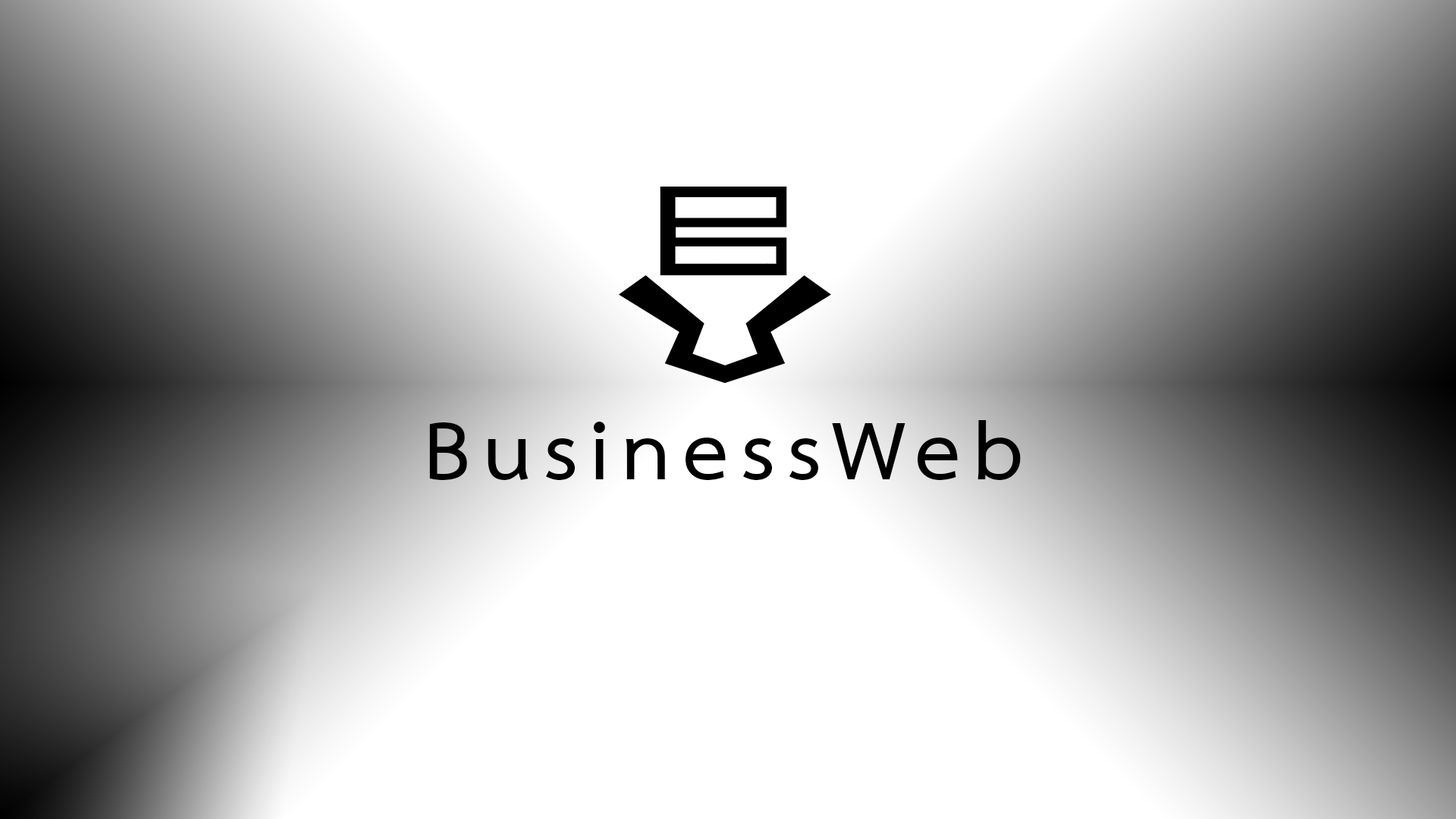
<style>
.page{position:relative;width:1456px;height:819px;background:#ffffff}
.page>*{position:absolute;margin:0}
.t1{font:117.5px "THSarabunNew-Bold";letter-spacing:0.1em;color:#000000}
</style>
<div class="page">
<p class="t1" style="left:429px;top:420px;width:592px;height:60px">BusinessWeb</p>
</div>
